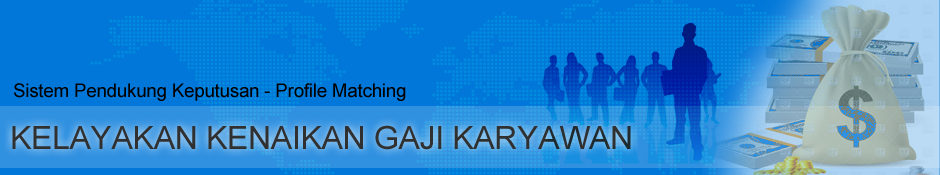
<style>
.page{position:relative;width:940px;height:175px;background:#0077d9}
.page>*{position:absolute;margin:0}
.t1{font:18.7px "ArialMT";letter-spacing:-0.01em;color:#000000}
.t2{font:32px "ArialMT";letter-spacing:-0.01em;color:#303030}
</style>
<div class="page">
<p class="t1" style="left:14px;top:83px;width:392px;height:18px">Sistem Pendukung Keputusan - Profile Matching</p>
<p class="t2" style="left:12px;top:125px;width:619px;height:25px">KELAYAKAN KENAIKAN GAJI KARYAWAN</p>
</div>
